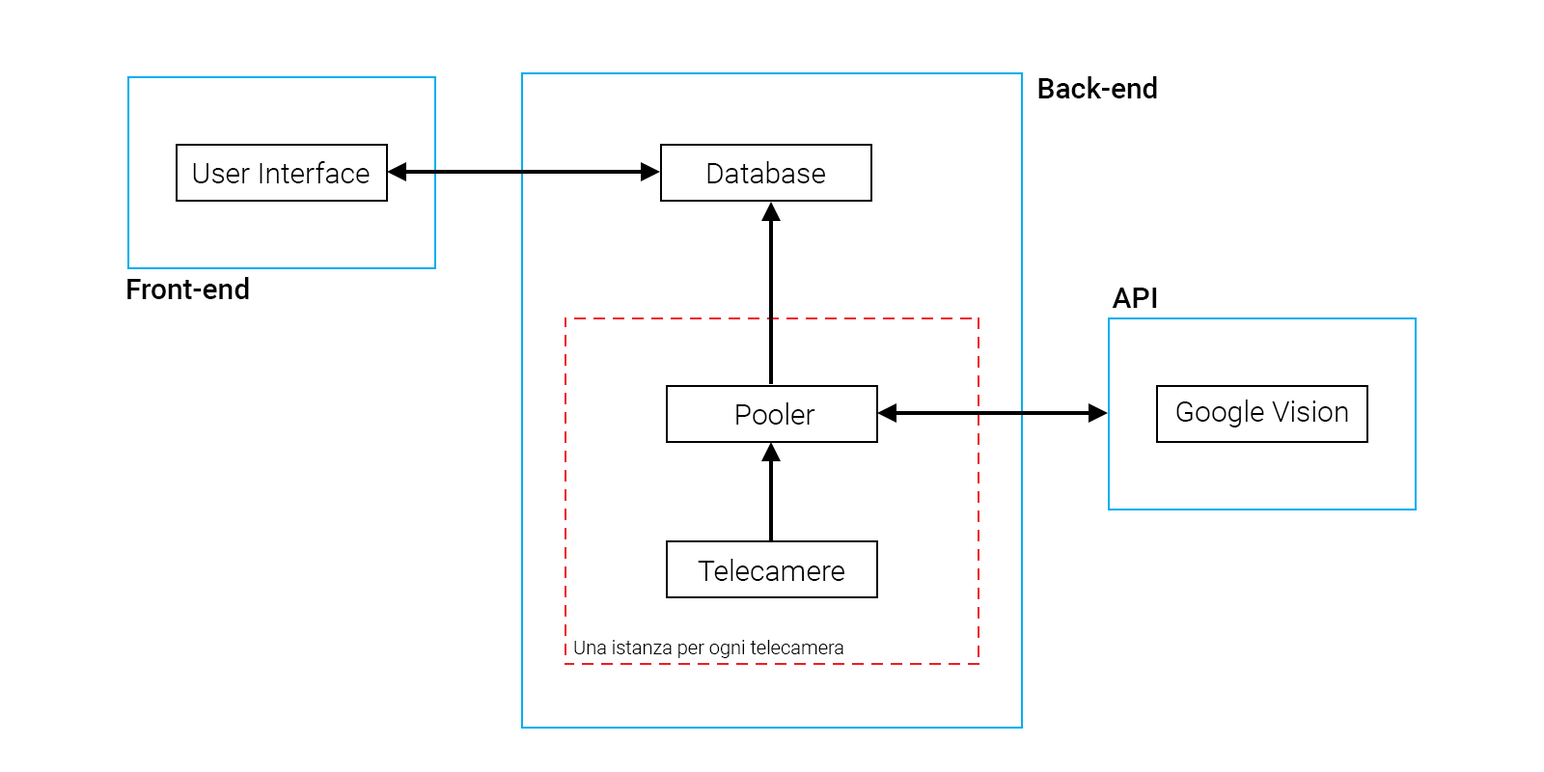
<style>
.page{position:relative;width:1544px;height:772px;background:#ffffff}
.page>*{position:absolute;margin:0}
.t1{font:29px "Roboto-Medium";color:#000000}
.t2{font:29px "Roboto-Light";color:#000000}
.t3{font:19.3px "Roboto-Light";color:#000000}
</style>
<div class="page">
<p class="t1" style="left:1039px;top:76px;width:118px;height:22px">Back-end</p>
<p class="t2" style="left:193px;top:161px;width:177px;height:22px">User Interface</p>
<p class="t2" style="left:707px;top:161px;width:118px;height:22px">Database</p>
<p class="t1" style="left:127px;top:277px;width:122px;height:22px">Front-end</p>
<p class="t1" style="left:1112px;top:288px;width:45px;height:20px">API</p>
<p class="t2" style="left:1177px;top:400px;width:171px;height:28px">Google Vision</p>
<p class="t2" style="left:736px;top:402px;width:80px;height:23px">Pooler</p>
<p class="t2" style="left:698px;top:559px;width:147px;height:22px">Telecamere</p>
<p class="t3" style="left:574px;top:640px;width:270px;height:18px">Una istanza per ogni telecamera</p>
</div>
